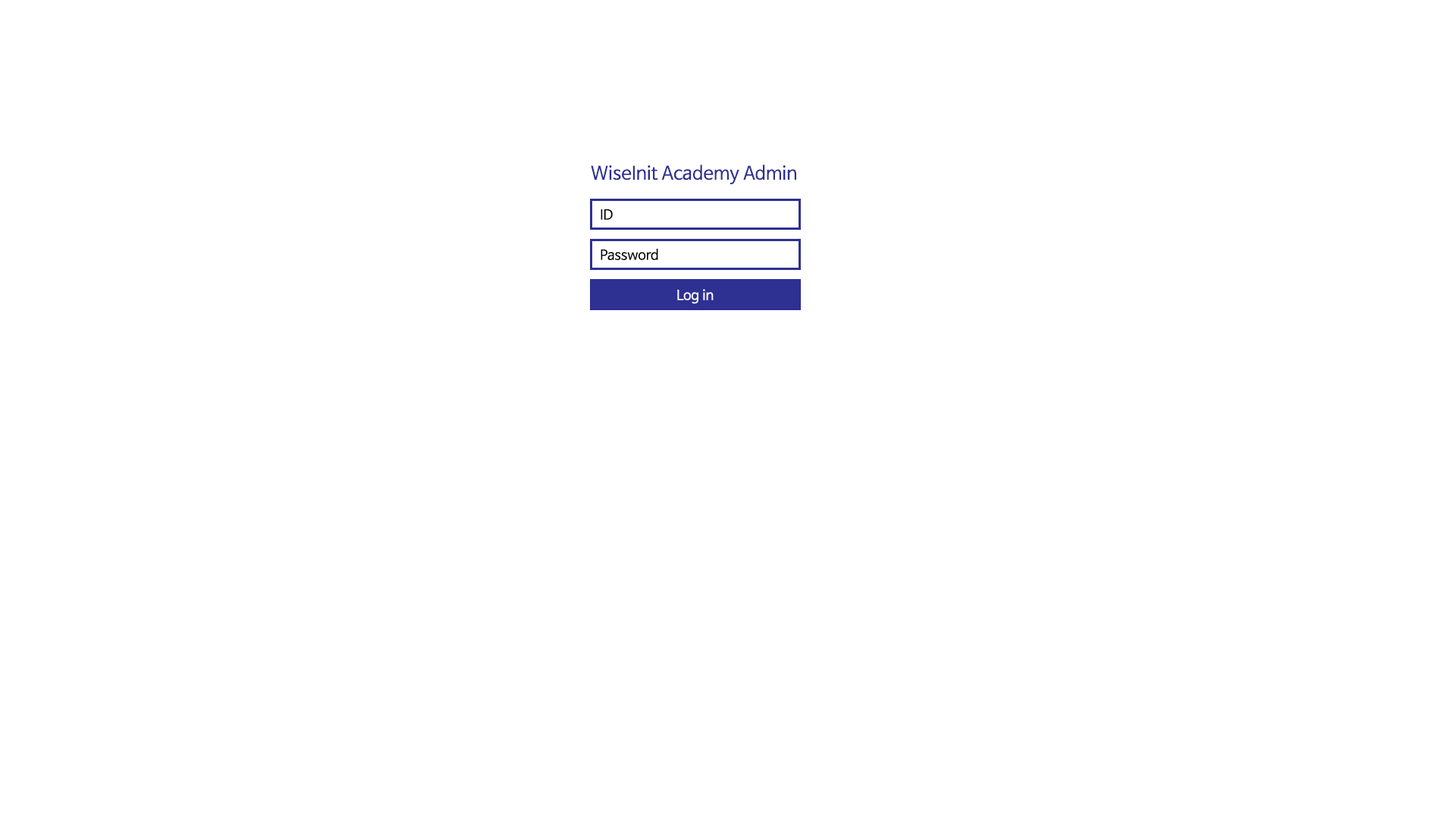
<style>
.page{position:relative;width:1456px;height:819px;background:#ffffff}
.page>*{position:absolute;margin:0}
.t1{font:18.2px "NanumBarunGothic";color:#2e3092}
.t2{font:13.6px "NanumBarunGothic";color:#000000}
.t3{font:13.6px "NanumBarunGothic";color:#ffffff}
</style>
<div class="page">
<p class="t1" style="left:591px;top:165px;width:205px;height:19px">WiseInit Academy Admin</p>
<p class="t2" style="left:601px;top:209px;width:12px;height:11px">ID</p>
<p class="t2" style="left:601px;top:249px;width:57px;height:11px">Password</p>
<p class="t3" style="left:677px;top:289px;width:37px;height:15px">Log in</p>
</div>
